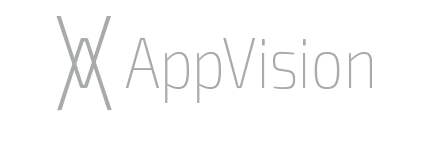
<style>
.page{position:relative;width:425px;height:142px;background:#ffffff}
.page>*{position:absolute;margin:0}
.t1{font:150px "Exo2-ThinCondensed";color:#a7abac}
.t2{font:72px "Exo2-ThinCondensed";color:#a7abac}
</style>
<div class="page">
<p class="t1" style="left:56px;top:16px;width:55px;height:72px">v</p>
<p class="t1" style="left:57px;top:38px;width:55px;height:73px;rotate:180deg">v</p>
<p class="t2" style="left:125px;top:37px;width:247px;height:66px">AppVision</p>
</div>
